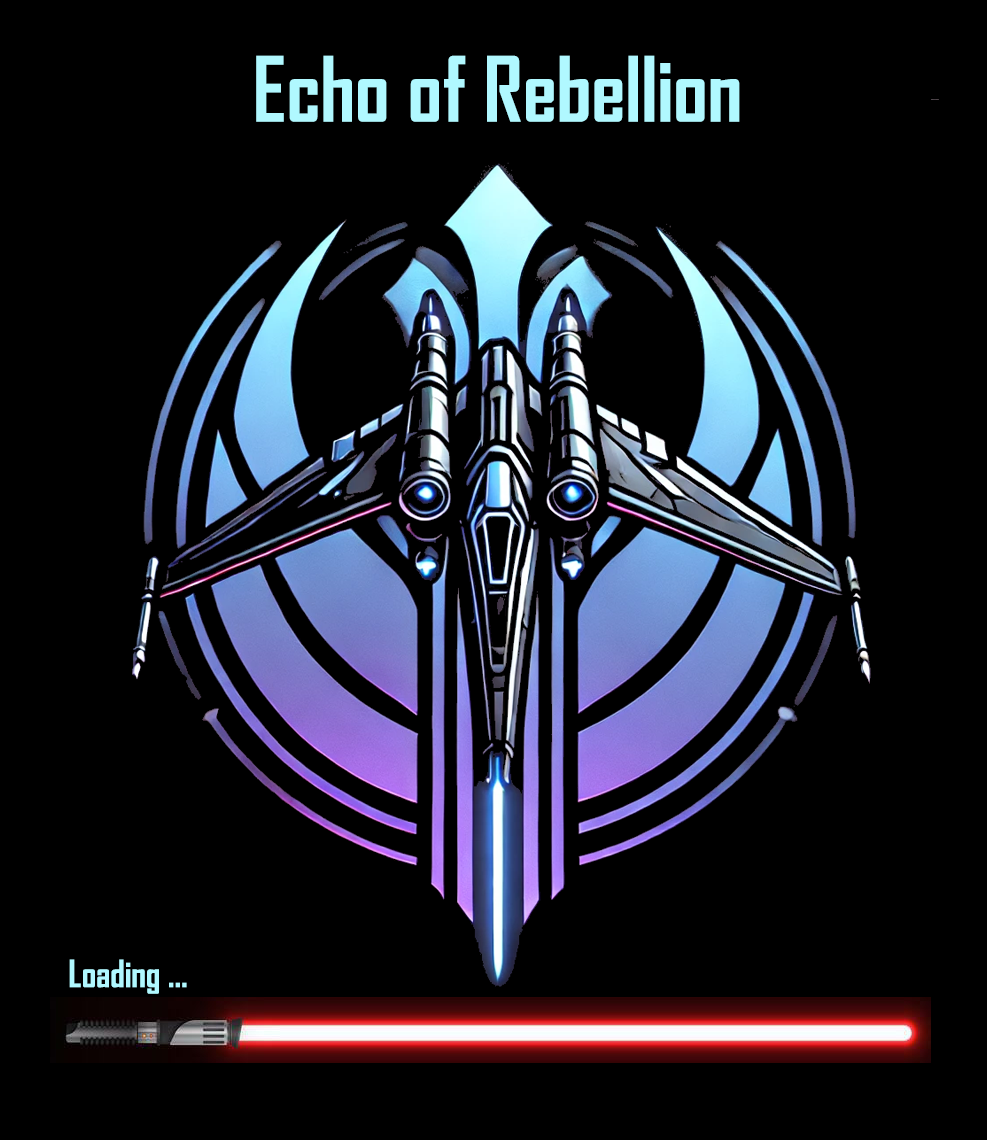
<style>
.page{position:relative;width:987px;height:1140px;background:#000000}
.page>*{position:absolute;margin:0}
.t1{font:86.2px "AgencyFB-Bold";color:#b0f8ff}
.t2{font:36px "AgencyFB-Bold";color:#b0f8ff}
</style>
<div class="page">
<p class="t1" style="left:256px;top:55px;width:484px;height:67px">Echo of Rebellion</p>
<p class="t2" style="left:69px;top:959px;width:118px;height:35px">Loading ...</p>
</div>
